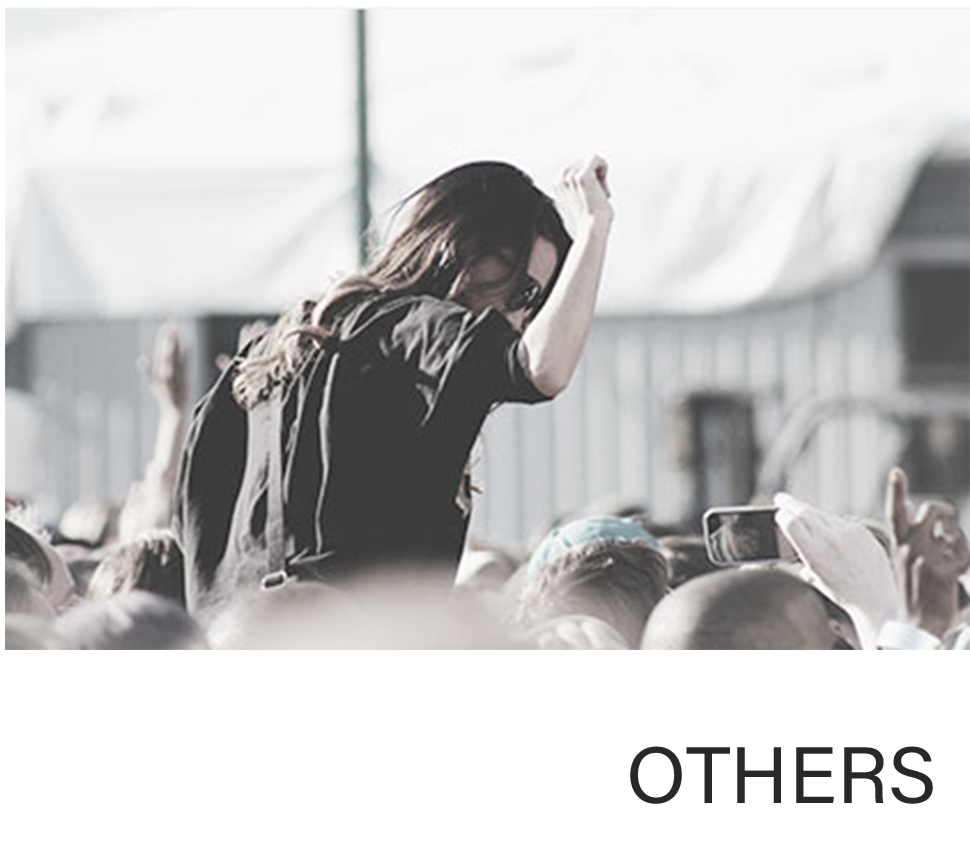
<style>
.page{position:relative;width:970px;height:868px;background:#ffffff}
.page>*{position:absolute;margin:0}
.t1{font:80px "AcuminConcept-Regular";color:#282828}
</style>
<div class="page">
<p class="t1" style="left:630px;top:746px;width:303px;height:58px">OTHERS</p>
</div>
